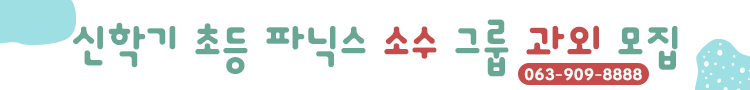
<style>
.page{position:relative;width:750px;height:90px;background:#ffffff}
.page>*{position:absolute;margin:0}
.t1{font:67.3px "Dongle-Bold";color:#68a793}
.t2{font:67.3px "Dongle-Bold";color:#c44c4b}
.t3{font:28.5px "Dongle-Bold";letter-spacing:0.005em;color:#faf9f8}
</style>
<div class="page">
<p class="t1" style="left:73px;top:19px;width:605px;height:58px">신학기 초등 파닉스<span class="t2"> 소수 </span>그룹 <span class="t2">과외</span> 모집</p>
<p class="t3" style="left:524px;top:68px;width:118px;height:13px">063-909-8888</p>
</div>
